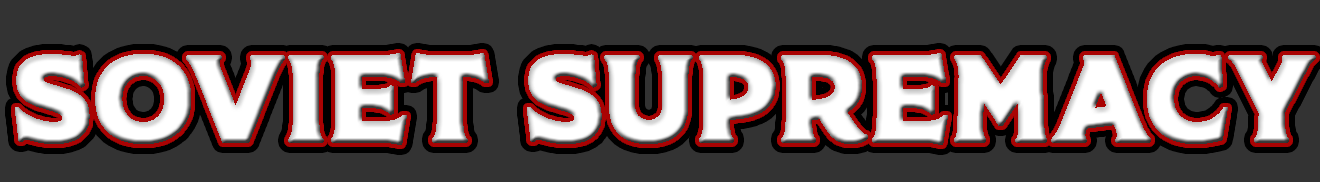
<style>
.page{position:relative;width:1320px;height:182px;background:#333333}
.page>*{position:absolute;margin:0}
.t1{font:120px "Rodfat-Two-Demo";color:#ffffff;text-transform:uppercase;font-weight:bold}
</style>
<div class="page">
<p class="t1" style="left:15px;top:53px;width:1301px;height:92px">Soviet supremacy</p>
<p class="t1" style="left:15px;top:53px;width:1301px;height:92px">Soviet supremacy</p>
<p class="t1" style="left:15px;top:53px;width:1301px;height:92px">Soviet supremacy</p>
</div>
